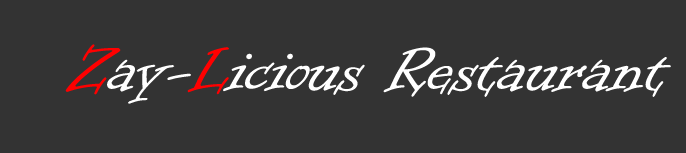
<style>
.page{position:relative;width:686px;height:153px;background:#333333}
.page>*{position:absolute;margin:0}
.t1{font:72px "InformalRoman-Regular";color:#ffffff}
.t2{font:72px "InformalRoman-Regular";color:#ff0000}
</style>
<div class="page">
<p class="t1" style="left:65px;top:44px;width:606px;height:60px"><span class="t2">Z</span>ay-<span class="t2">L</span>icious Restaurant</p>
</div>
